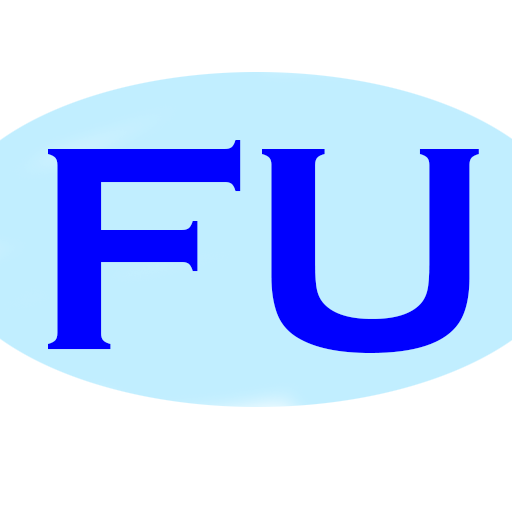
<style>
.page{position:relative;width:512px;height:512px;background:#ffffff}
.page>*{position:absolute;margin:0}
.t1{font:300px "CopperplateGothic-Bold";color:#0000ff}
</style>
<div class="page">
<p class="t1" style="left:48px;top:140px;width:431px;height:213px">FU</p>
</div>
